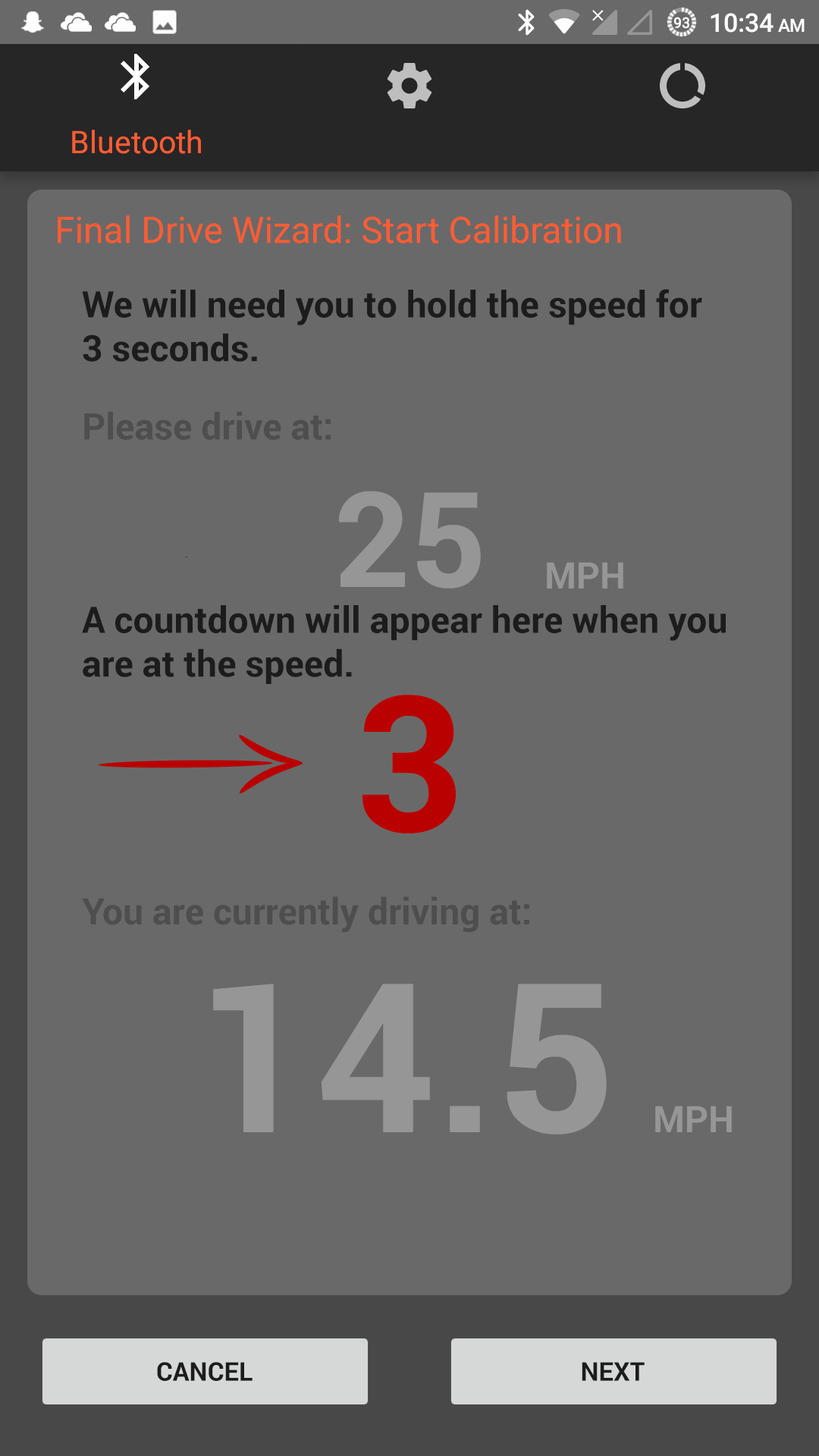
<style>
.page{position:relative;width:819px;height:1456px;background:#696969}
.page>*{position:absolute;margin:0}
.t1{font:36.4px "Roboto-Regular";color:#ff5c33}
.t2{font:36.4px "Roboto-Bold";color:#1c1c1c}
.t3{font:36.4px "Roboto-Bold";color:#4e4e4e}
.t4{font:132.7px "Roboto-Bold";color:#969696}
.t5{font:36.4px "Roboto-Bold";color:#969696}
.t6{font:189.6px "Roboto-Bold";color:#ba0101}
.t7{font:208.5px "Roboto-Bold";color:#969696}
.t8{font:25.8px "Roboto-Bold";color:#1c1c1c}
</style>
<div class="page">
<p class="t1" style="left:58px;top:215px;width:563px;height:28px">Final Drive Wizard: Start Calibration</p>
<p class="t2" style="left:82px;top:289px;width:620px;height:73px">We will need you to hold the speed for<br>3 seconds.</p>
<p class="t3" style="left:84px;top:412px;width:247px;height:28px">Please drive at:</p>
<p class="t4" style="left:339px;top:491px;width:142px;height:97px">25</p>
<p class="t5" style="left:547px;top:562px;width:76px;height:26px">MPH</p>
<p class="t2" style="left:82px;top:605px;width:644px;height:79px">A countdown will appear here when you<br>are at the speed.</p>
<p class="t6" style="left:362px;top:695px;width:94px;height:138px">3</p>
<p class="t3" style="left:82px;top:896px;width:447px;height:37px">You are currently driving at:</p>
<p class="t7" style="left:213px;top:984px;width:394px;height:150px">14.5</p>
<p class="t5" style="left:655px;top:1106px;width:77px;height:26px">MPH</p>
<p class="t8" style="left:157px;top:1362px;width:96px;height:19px">CANCEL</p>
<p class="t8" style="left:582px;top:1362px;width:63px;height:19px">NEXT</p>
</div>
